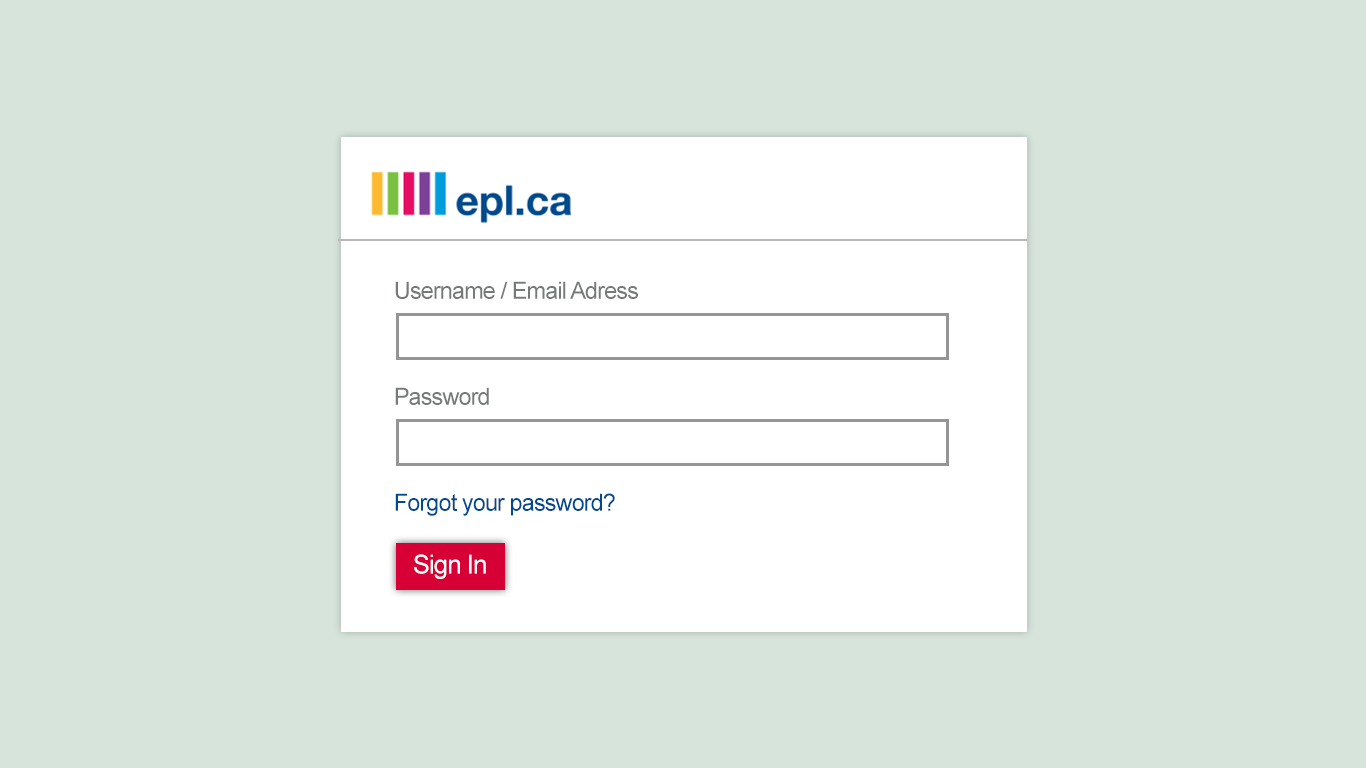
<style>
.page{position:relative;width:1366px;height:768px;background:#d6e4dc}
.page>*{position:absolute;margin:0}
.t1{font:23.6px "ArialMT";letter-spacing:-0.04em;color:#767979}
.t2{font:23.6px "ArialMT";letter-spacing:-0.04em;color:#004a8d}
.t3{font:26px "ArialMT";letter-spacing:-0.04em;color:#ffffff}
</style>
<div class="page">
<p class="t1" style="left:395px;top:281px;width:243px;height:18px">Username / Email Adress</p>
<p class="t1" style="left:395px;top:387px;width:94px;height:18px">Password</p>
<p class="t2" style="left:395px;top:493px;width:220px;height:23px">Forgot your password?</p>
<p class="t3" style="left:414px;top:554px;width:72px;height:25px">Sign In</p>
</div>
